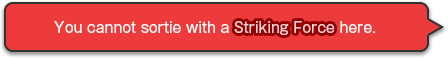
<style>
.page{position:relative;width:448px;height:58px;background:#ed3b3b}
.page>*{position:absolute;margin:0}
.t1{font:14px "GothicMB101Pro-Regular";color:#ffffff}
.t2{font:14px "GothicMB101Pro-Regular";color:#ffd3d3}
</style>
<div class="page">
<p class="t1" style="left:54px;top:21px;width:321px;height:14px">You cannot sortie with a <span class="t2">Striking Force</span> here.</p>
<p class="t1" style="left:54px;top:21px;width:321px;height:14px">You cannot sortie with a <span class="t2">Striking Force</span> here.</p>
</div>
